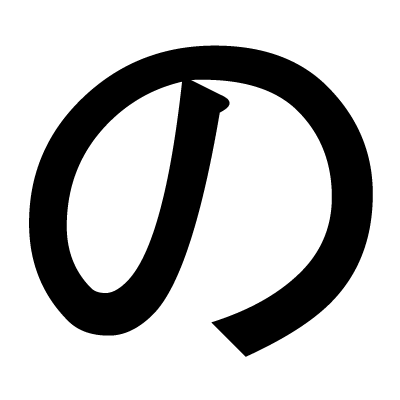
<style>
.page{position:relative;width:400px;height:400px;background:#ffffff}
.page>*{position:absolute;margin:0}
.t1{font:416.7px "MS-PGothic";color:#000000}
</style>
<div class="page">
<p class="t1" style="left:29px;top:45px;width:344px;height:312px">の</p>
</div>
